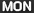
<style>
.page{position:relative;width:34px;height:13px}
.page>*{position:absolute;margin:0}
.t1{font:13.9px "K2D-ExtraBold";color:#ffffff}
</style>
<div class="page">
<p class="t1" style="left:2px;top:1px;width:30px;height:11px">MON</p>
</div>
